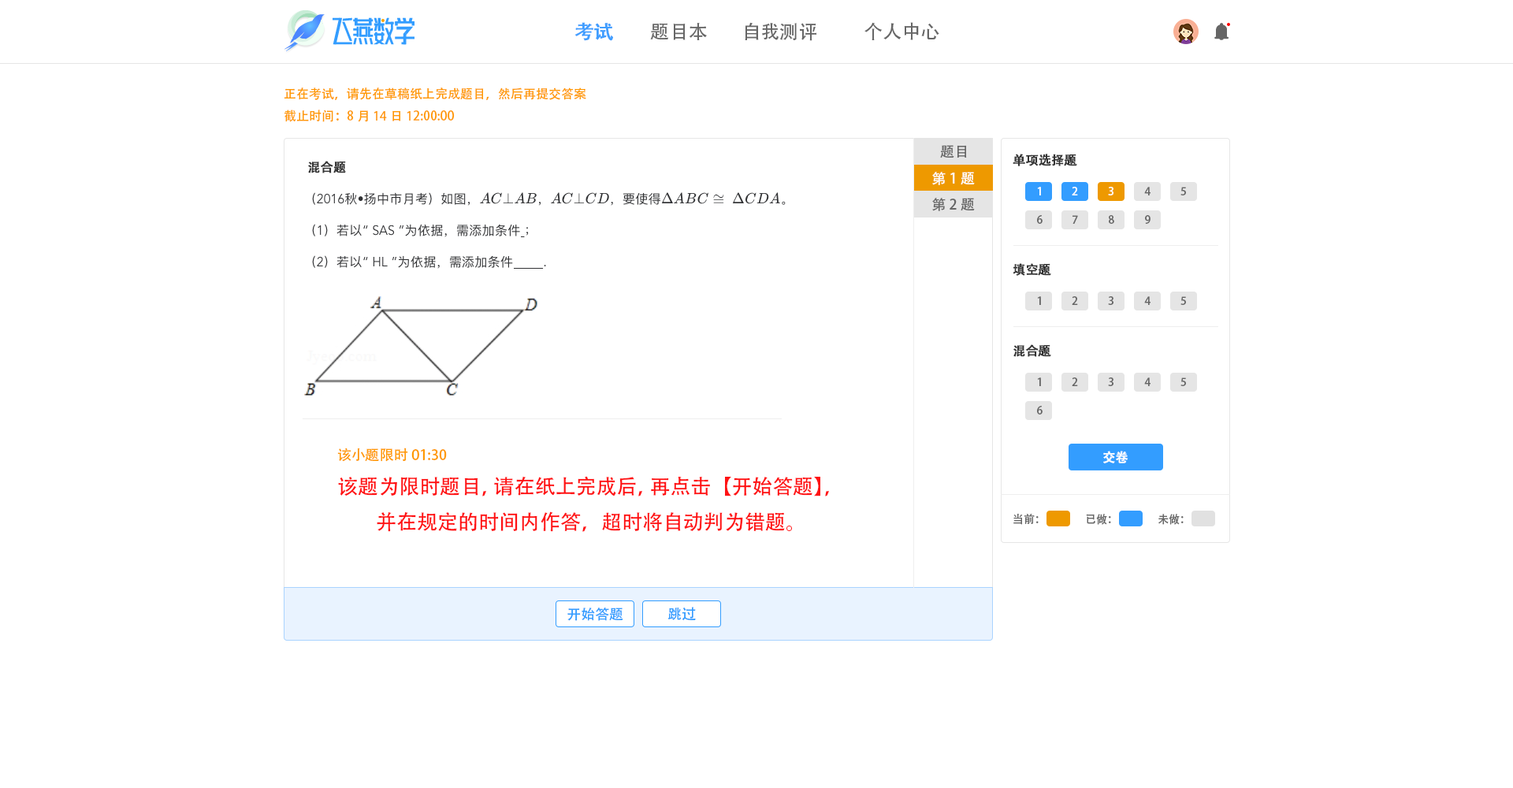
<style>
.page{position:relative;width:1513px;height:788px;background:#ffffff}
.page>*{position:absolute;margin:0}
.t1{font:18.9px "AdobeHeitiStd-Regular";color:#409eff;font-weight:bold}
.t2{font:18.9px "AdobeHeitiStd-Regular";color:#666666}
.t3{font:12.6px "AdobeHeitiStd-Regular";color:#ff9902}
.t4{font:14.2px "AdobeHeitiStd-Regular";color:#666666}
.t5{font:12.6px "AdobeHeitiStd-Regular";color:#333333;font-weight:bold}
.t6{font:14.2px "AdobeHeitiStd-Regular";color:#ffffff}
.t7{font:11px "AdobeHeitiStd-Regular";color:#ffffff}
.t8{font:11px "AdobeHeitiStd-Regular";color:#666666}
.t9{font:14.2px "AdobeHeitiStd-Regular";color:#ff9902}
.t10{font:12.6px "AdobeHeitiStd-Regular";color:#ffffff;font-weight:bold}
.t11{font:20.5px "AdobeHeitiStd-Regular";color:#ff1214}
.t12{font:14.2px "AdobeHeitiStd-Regular";color:#339dff}
</style>
<div class="page">
<p class="t1" style="left:575px;top:22px;width:38px;height:19px">考试</p>
<p class="t2" style="left:650px;top:23px;width:57px;height:17px">题目本</p>
<p class="t2" style="left:745px;top:22px;width:71px;height:19px">自我测评</p>
<p class="t2" style="left:865px;top:22px;width:74px;height:18px">个人中心</p>
<p class="t3" style="left:284px;top:87px;width:302px;height:13px">正在考试，请先在草稿纸上完成题目，然后再提交答案</p>
<p class="t3" style="left:284px;top:110px;width:171px;height:12px">截止时间：8月14日12:00:00</p>
<p class="t4" style="left:940px;top:145px;width:27px;height:13px">题目</p>
<p class="t5" style="left:308px;top:161px;width:38px;height:12px">混合题</p>
<p class="t5" style="left:1013px;top:154px;width:64px;height:12px">单项选择题</p>
<p class="t6" style="left:932px;top:172px;width:43px;height:13px">第1题</p>
<p class="t4" style="left:932px;top:198px;width:43px;height:13px">第2题</p>
<p class="t7" style="left:1037px;top:187px;width:4px;height:8px">1</p>
<p class="t7" style="left:1072px;top:187px;width:6px;height:8px">2</p>
<p class="t7" style="left:1108px;top:187px;width:6px;height:8px">3</p>
<p class="t8" style="left:1144px;top:187px;width:7px;height:8px">4</p>
<p class="t8" style="left:1181px;top:187px;width:5px;height:8px">5</p>
<p class="t8" style="left:1037px;top:215px;width:6px;height:9px">6</p>
<p class="t8" style="left:1073px;top:215px;width:5px;height:9px">7</p>
<p class="t8" style="left:1109px;top:215px;width:5px;height:9px">8</p>
<p class="t8" style="left:1145px;top:215px;width:6px;height:9px">9</p>
<p class="t5" style="left:1013px;top:263px;width:38px;height:13px">填空题</p>
<p class="t8" style="left:1037px;top:296px;width:4px;height:9px">1</p>
<p class="t8" style="left:1072px;top:296px;width:6px;height:9px">2</p>
<p class="t8" style="left:1108px;top:296px;width:6px;height:9px">3</p>
<p class="t8" style="left:1144px;top:296px;width:7px;height:9px">4</p>
<p class="t8" style="left:1181px;top:296px;width:5px;height:9px">5</p>
<p class="t5" style="left:1013px;top:344px;width:38px;height:13px">混合题</p>
<p class="t8" style="left:1037px;top:377px;width:4px;height:9px">1</p>
<p class="t8" style="left:1072px;top:377px;width:6px;height:9px">2</p>
<p class="t8" style="left:1108px;top:377px;width:6px;height:9px">3</p>
<p class="t8" style="left:1144px;top:377px;width:7px;height:9px">4</p>
<p class="t8" style="left:1181px;top:377px;width:5px;height:9px">5</p>
<p class="t8" style="left:1037px;top:406px;width:6px;height:9px">6</p>
<p class="t9" style="left:337px;top:448px;width:110px;height:14px">该小题限时01:30</p>
<p class="t10" style="left:1103px;top:451px;width:26px;height:12px">交卷</p>
<p class="t11" style="left:338px;top:476px;width:491px;height:56px;text-align:center">该题为限时题目，请在纸上完成后，再点击【开始答题】，并在规定的时间内作答，超时将自动判为错题。</p>
<p class="t8" style="left:1013px;top:514px;width:26px;height:11px">当前：</p>
<p class="t8" style="left:1086px;top:514px;width:25px;height:11px">已做：</p>
<p class="t8" style="left:1158px;top:514px;width:26px;height:11px">未做：</p>
<p class="t12" style="left:567px;top:608px;width:56px;height:13px">开始答题</p>
<p class="t12" style="left:668px;top:607px;width:28px;height:14px">跳过</p>
</div>
